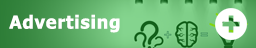
<style>
.page{position:relative;width:256px;height:48px}
.page>*{position:absolute;margin:0}
.t1{font:18px "Tahoma-Bold";letter-spacing:0.045em;color:#ffffff}
</style>
<div class="page">
<p class="t1" style="left:9px;top:14px;width:111px;height:19px">Advertising</p>
</div>
